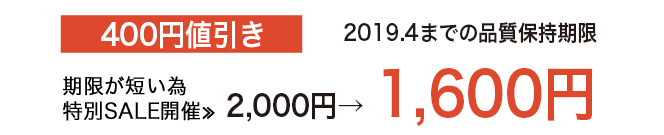
<style>
.page{position:relative;width:664px;height:135px;background:#ffffff}
.page>*{position:absolute;margin:0}
.t1{font:30px "HiraKakuPro-W6";color:#fffffe;scale:0.9 1}
.t2{font:22px "HiraKakuPro-W6";color:#221815;scale:0.9 1}
.t3{font:60px "HiraKakuPro-W6";color:#de482d;scale:0.9 1}
.t4{font:30px "HiraKakuPro-W6";color:#221815;scale:0.9 1}
</style>
<div class="page">
<p class="t1" style="left:101px;top:20px;width:162px;height:29px">400円値引き</p>
<p class="t2" style="left:344px;top:22px;width:253px;height:22px">2019.4までの品質保持期限</p>
<p class="t3" style="left:383px;top:68px;width:210px;height:58px">1,600円</p>
<p class="t4" style="left:227px;top:93px;width:136px;height:29px">2,000円→</p>
</div>
